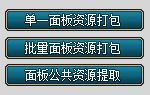
<style>
.page{position:relative;width:150px;height:95px;background:#d6d6d6}
.page>*{position:absolute;margin:0}
.t1{font:12px "SimSun";color:#ffffff}
</style>
<div class="page">
<p class="t1" style="left:25px;top:14px;width:95px;height:12px">单一面板资源打包</p>
<p class="t1" style="left:25px;top:42px;width:95px;height:12px">批量面板资源打包</p>
<p class="t1" style="left:25px;top:69px;width:95px;height:12px">面板公共资源提取</p>
</div>
